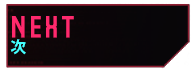
<style>
.page{position:relative;width:194px;height:73px}
.page>*{position:absolute;margin:0}
.t1{font:52.5px "Party-Lights-[WLM]-Flat";color:#ff296d}
.t2{font:15.7px "KozGoPr6N-Bold";color:#43ffff}
</style>
<div class="page">
<p class="t1" style="left:12px;top:16px;width:62px;height:22px">Next</p>
<p class="t2" style="left:10px;top:39px;width:16px;height:16px">次</p>
</div>
